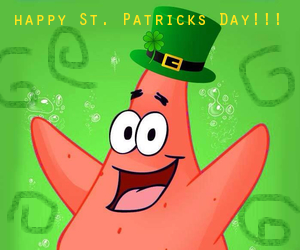
<style>
.page{position:relative;width:300px;height:250px}
.page>*{position:absolute;margin:0}
.t1{font:18px "OratorStd";color:#ffe51a}
</style>
<div class="page">
<p class="t1" style="left:15px;top:13px;width:264px;height:12px">happy St. Patricks Day!!!</p>
</div>
